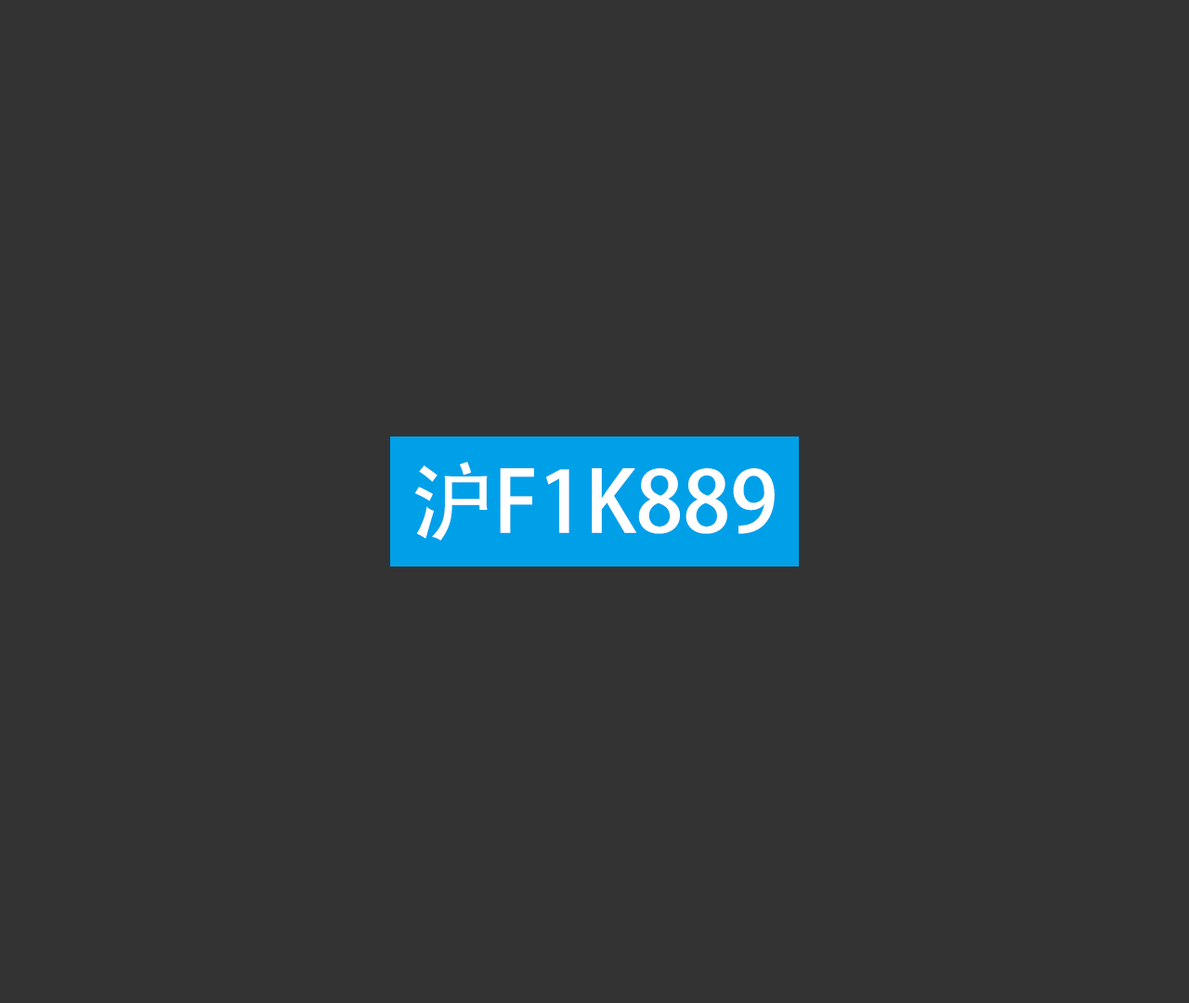
<style>
.page{position:relative;width:1189px;height:1003px;background:#333333}
.page>*{position:absolute;margin:0}
.t1{font:83.8px "AdobeHeitiStd-Regular";color:#ffffff}
</style>
<div class="page">
<p class="t1" style="left:415px;top:462px;width:360px;height:79px">沪F1K889</p>
</div>
